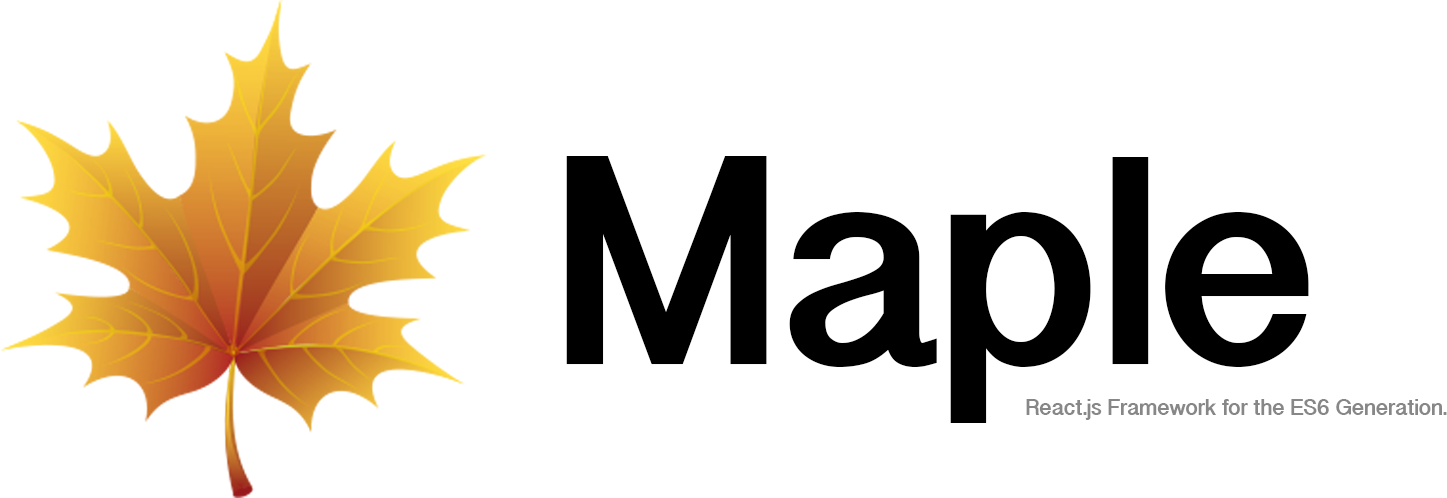
<style>
.page{position:relative;width:1447px;height:498px;background:#ffffff}
.page>*{position:absolute;margin:0}
.t1{font:23px "GurmukhiSangamMN-Bold";color:#878787}
.t2{font:300px "GurmukhiSangamMN-Bold";color:#000000}
.t3{font:20px "GurmukhiSangamMN-Bold";color:#878787}
</style>
<div class="page">
<p class="t1" style="left:566px;top:156px;width:881px;height:267px"><span class="t2">Maple<br></span><span class="t3"><br></span>             React.js Framework for the ES6 Generation.</p>
</div>
